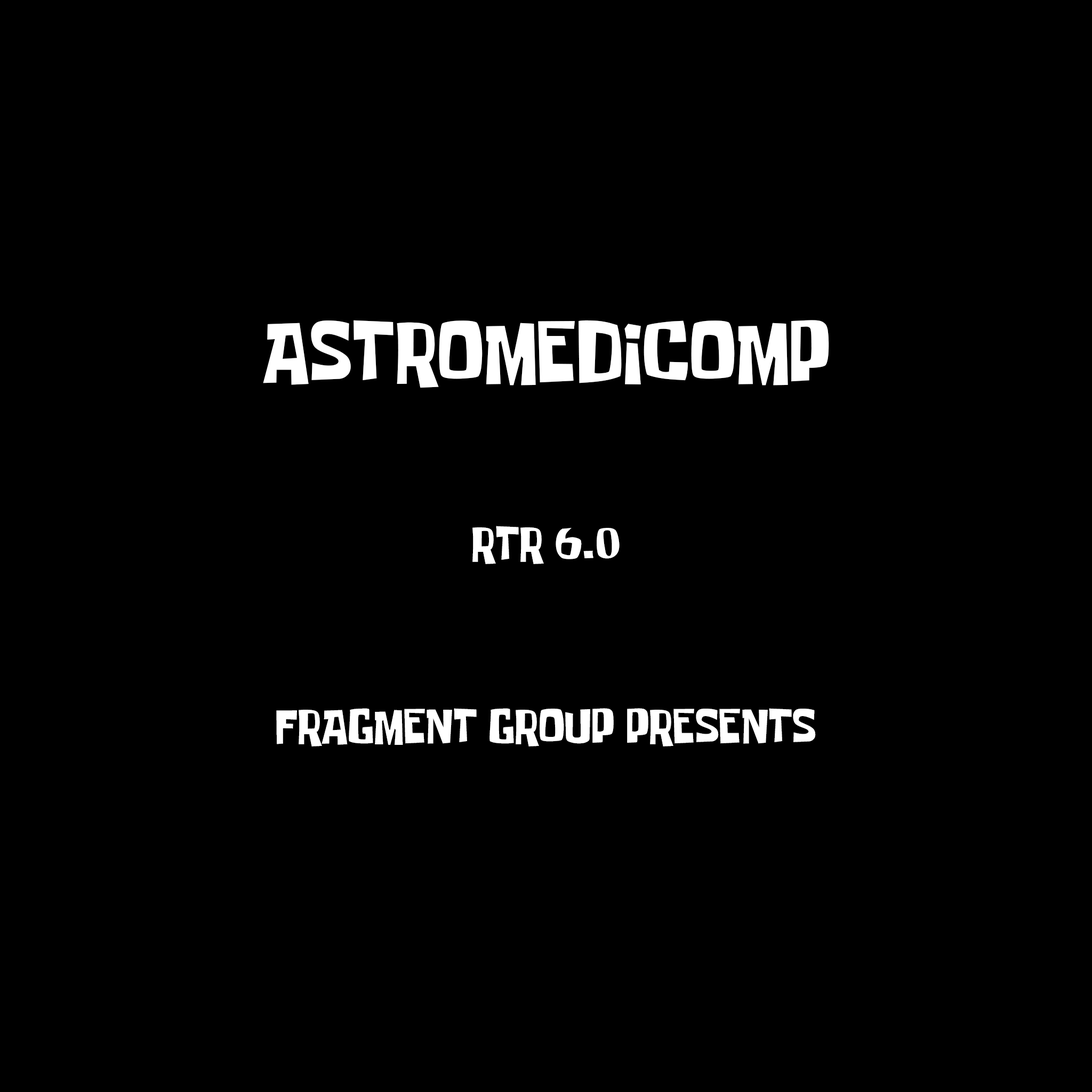
<style>
.page{position:relative;width:1092px;height:1092px;background:#000000}
.page>*{position:absolute;margin:0}
.t1{font:68.4px "SpongeboyMeBob";color:#ffffff}
.t2{font:38.4px "SpongeboyMeBob";color:#ffffff}
</style>
<div class="page">
<p class="t1" style="left:263px;top:320px;width:566px;height:68px">ASTROMEDICOMP</p>
<p class="t2" style="left:472px;top:526px;width:148px;height:38px">RTR 6.0</p>
<p class="t2" style="left:276px;top:708px;width:540px;height:38px">FRAGMENT GROUP PRESENTS</p>
</div>
